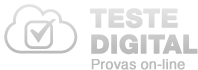
<style>
.page{position:relative;width:198px;height:70px;background:#ffffff}
.page>*{position:absolute;margin:0}
.t1{font:44px/26px "HelveticaNeueLTStd-Hv";color:#c9c9c9;font-weight:bold}
.t2{font:24px "Helvetica";color:#bababa;font-weight:bold}
</style>
<div class="page">
<p class="t1" style="left:90px;top:8px;width:108px;height:47px">TESTE <br>DIGITAL</p>
<p class="t2" style="left:91px;top:59px;width:94px;height:11px">Provas on-line</p>
</div>
